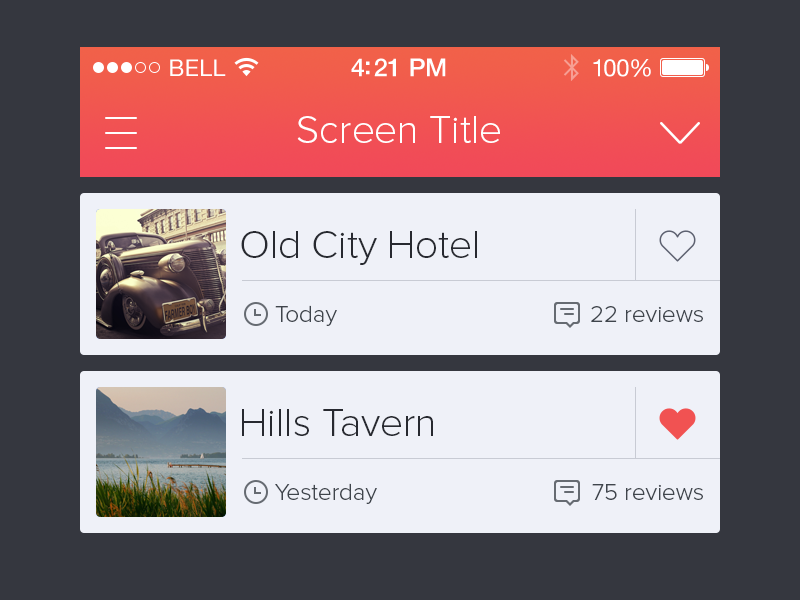
<style>
.page{position:relative;width:800px;height:600px;background:#35373f}
.page>*{position:absolute;margin:0}
.t1{font:40px "ProximaNova-Light";color:#ffffff}
.t2{font:40px "ProximaNova-Light";color:#272930}
.t3{font:24px "ProximaNova-Light";color:#3f454c}
</style>
<div class="page">
<p class="t1" style="left:297px;top:116px;width:203px;height:27px">Screen Title</p>
<p class="t2" style="left:241px;top:231px;width:236px;height:34px">Old City Hotel</p>
<p class="t3" style="left:275px;top:305px;width:62px;height:21px">Today</p>
<p class="t3" style="left:591px;top:306px;width:112px;height:16px">22 reviews</p>
<p class="t2" style="left:242px;top:409px;width:191px;height:27px">Hills Tavern</p>
<p class="t3" style="left:275px;top:483px;width:102px;height:21px">Yesterday</p>
<p class="t3" style="left:592px;top:484px;width:111px;height:16px">75 reviews</p>
</div>
